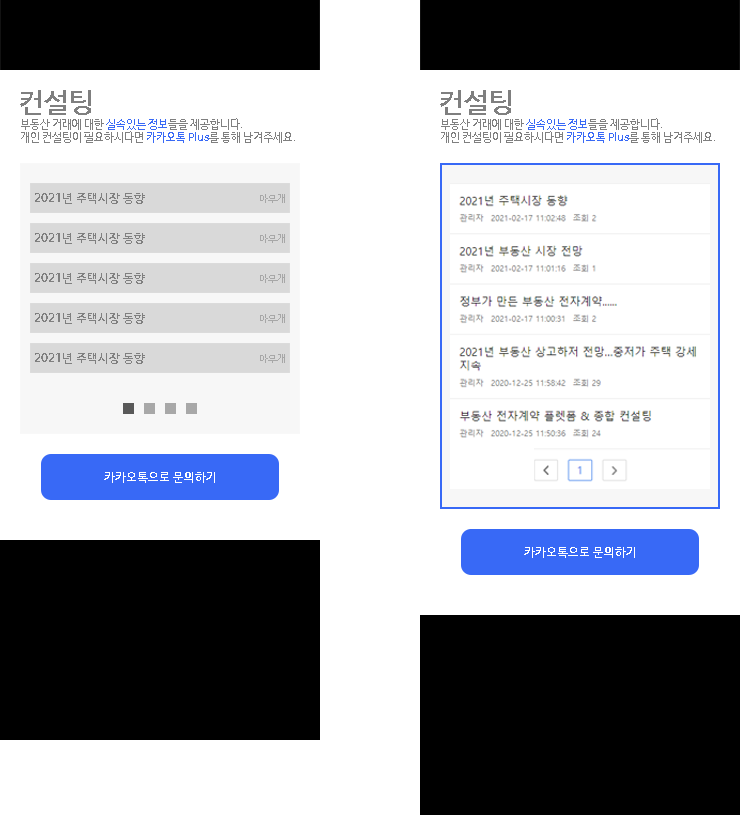
<style>
.page{position:relative;width:740px;height:815px;background:#ffffff}
.page>*{position:absolute;margin:0}
.t1{font:28px "NanumBarunGothicBold";color:#7f7f7f}
.t2{font:11px "NanumBarunGothic";color:#7f7f7f}
.t3{font:11px "NanumBarunGothic";color:#3869f6}
.t4{font:12px "NanumBarunGothicBold";color:#7f7f7f;scale:0.96 1}
.t5{font:10px "NanumBarunGothicUltraLight";color:#a7a7a7}
.t6{font:12px "NanumBarunGothicBold";color:#ffffff}
</style>
<div class="page">
<p class="t1" style="left:20px;top:90px;width:71px;height:25px">컨설팅</p>
<p class="t1" style="left:440px;top:90px;width:71px;height:25px">컨설팅</p>
<p class="t2" style="left:21px;top:118px;width:221px;height:12px">부동산 거래에 대한 <span class="t3">실속있는 정보</span>들을 제공합니다.</p>
<p class="t2" style="left:441px;top:118px;width:221px;height:12px">부동산 거래에 대한 <span class="t3">실속있는 정보</span>들을 제공합니다.</p>
<p class="t2" style="left:21px;top:131px;width:274px;height:12px">개인 컨설팅이 필요하시다면 <span class="t3">카카오톡 Plus</span>를 통해 남겨주세요.</p>
<p class="t2" style="left:441px;top:131px;width:274px;height:12px">개인 컨설팅이 필요하시다면 <span class="t3">카카오톡 Plus</span>를 통해 남겨주세요.</p>
<p class="t4" style="left:35px;top:193px;width:110px;height:11px">2021년 주택시장 동향</p>
<p class="t5" style="left:260px;top:194px;width:25px;height:9px">아무개</p>
<p class="t4" style="left:35px;top:233px;width:110px;height:11px">2021년 주택시장 동향</p>
<p class="t5" style="left:260px;top:234px;width:25px;height:9px">아무개</p>
<p class="t4" style="left:35px;top:273px;width:110px;height:11px">2021년 주택시장 동향</p>
<p class="t5" style="left:260px;top:274px;width:25px;height:9px">아무개</p>
<p class="t4" style="left:35px;top:313px;width:110px;height:11px">2021년 주택시장 동향</p>
<p class="t5" style="left:260px;top:314px;width:25px;height:9px">아무개</p>
<p class="t4" style="left:35px;top:353px;width:110px;height:11px">2021년 주택시장 동향</p>
<p class="t5" style="left:260px;top:354px;width:25px;height:9px">아무개</p>
<p class="t6" style="left:104px;top:472px;width:111px;height:11px">카카오톡으로 문의하기</p>
<p class="t6" style="left:524px;top:547px;width:111px;height:11px">카카오톡으로 문의하기</p>
</div>
